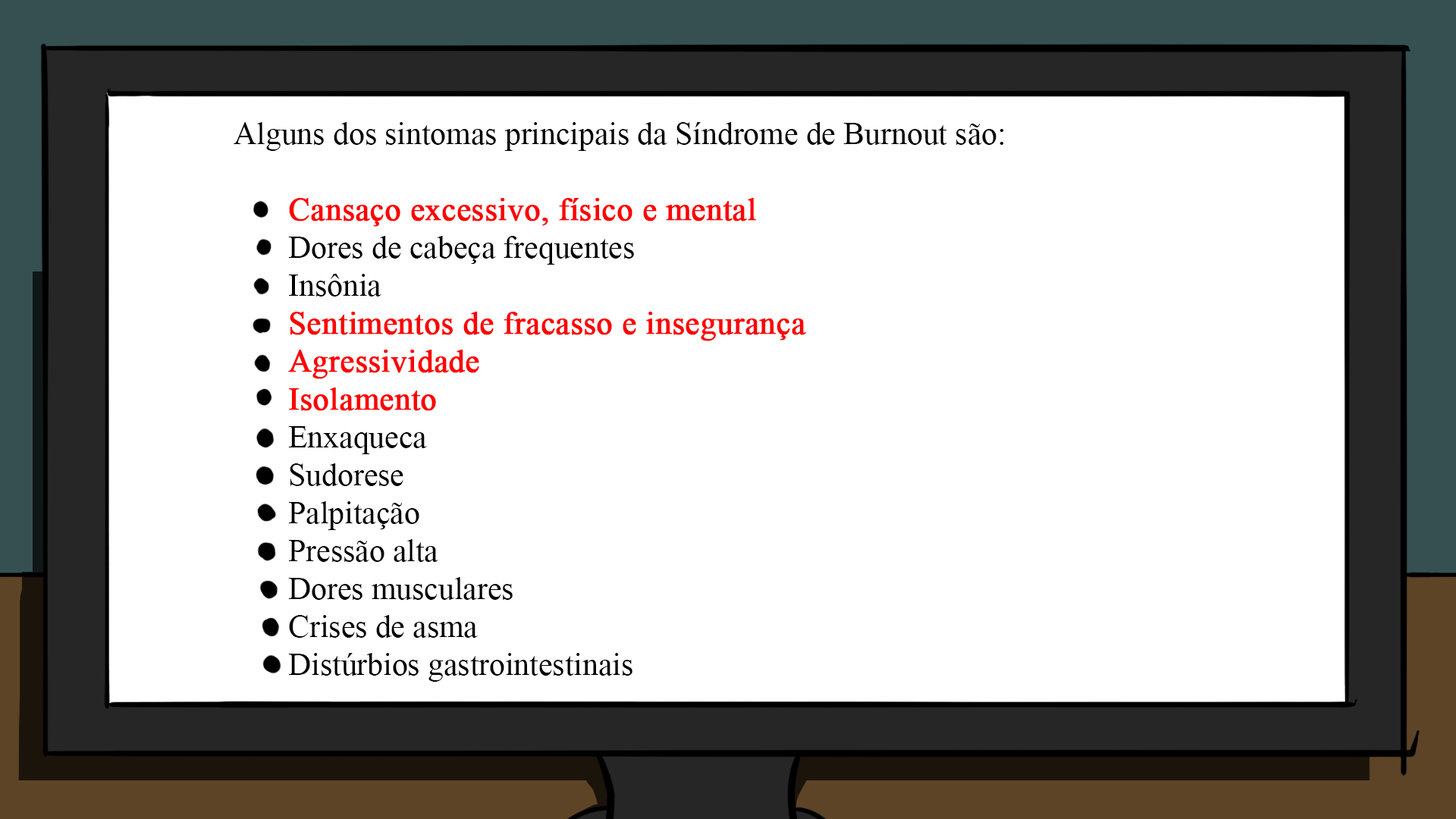
<style>
.page{position:relative;width:1456px;height:819px;background:#ffffff}
.page>*{position:absolute;margin:0}
.t1{font:31.6px "TimesNewRomanPSMT";color:#000000}
.t2{font:31.6px "TimesNewRomanPSMT";color:#ff0000;font-weight:bold}
</style>
<div class="page">
<p class="t1" style="left:234px;top:122px;width:770px;height:560px">Alguns dos sintomas principais da Síndrome de Burnout são:<br><br>  <span class="t2">Cansaço excessivo, físico e mental<br></span>  Dores de cabeça frequentes<br>  Insônia<br>  <span class="t2">Sentimentos de fracasso e insegurança<br>  Agressividade<br>  Isolamento<br></span>  Enxaqueca<br>  Sudorese<br>  Palpitação<br>  Pressão alta<br>  Dores musculares<br>  Crises de asma<br>  Distúrbios gastrointestinais</p>
</div>
